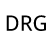
<style>
.page{position:relative;width:53px;height:41px;background:#ffffff}
.page>*{position:absolute;margin:0}
.t1{font:21.3px "DroidSans";color:#000000}
</style>
<div class="page">
<p class="t1" style="left:6px;top:15px;width:40px;height:16px">DRG</p>
</div>
